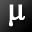
<style>
.page{position:relative;width:32px;height:32px}
.page>*{position:absolute;margin:0}
.t1{font:32px "TimesNewRomanPSMT";color:#ffffff;font-weight:bold}
</style>
<div class="page">
<p class="t1" style="left:9px;top:4px;width:16px;height:23px">μ</p>
</div>
